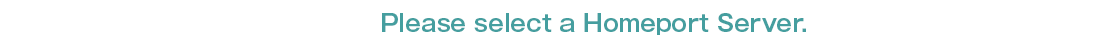
<style>
.page{position:relative;width:1097px;height:45px;background:#ffffff}
.page>*{position:absolute;margin:0}
.t1{font:23px "GothicMB101Pro-DeBold";color:#459e9f}
</style>
<div class="page">
<p class="t1" style="left:382px;top:13px;width:424px;height:22px">Please select a Homeport Server.</p>
</div>
